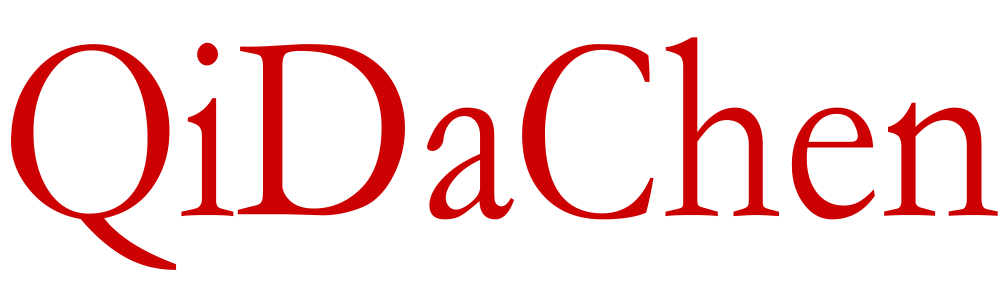
<style>
.page{position:relative;width:1000px;height:300px;background:#ffffff}
.page>*{position:absolute;margin:0}
.t1{font:269.1px "STSong";color:#cc0000;scale:0.87 1}
</style>
<div class="page">
<p class="t1" style="left:11px;top:37px;width:987px;height:233px">QiDaChen</p>
</div>
